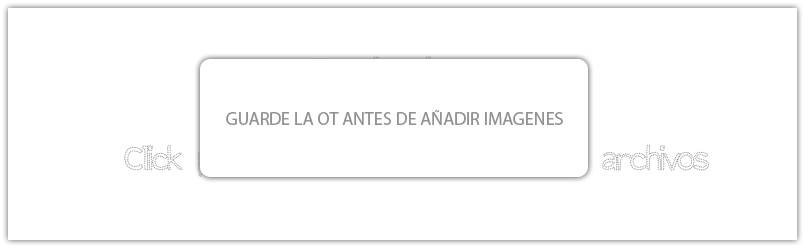
<style>
.page{position:relative;width:805px;height:248px;background:#ffffff}
.page>*{position:absolute;margin:0}
.t1{font:18px "MyriadPro-Regular";color:#929292}
.t2{font:72px "DotOutline";color:#ffffff}
</style>
<div class="page">
<p class="t1" style="left:226px;top:110px;width:337px;height:15px">GUARDE LA OT ANTES DE AÑADIR IMAGENES</p>
<p class="t2" style="left:124px;top:144px;width:586px;height:33px">Click para abrir el explorador de archivos</p>
</div>
